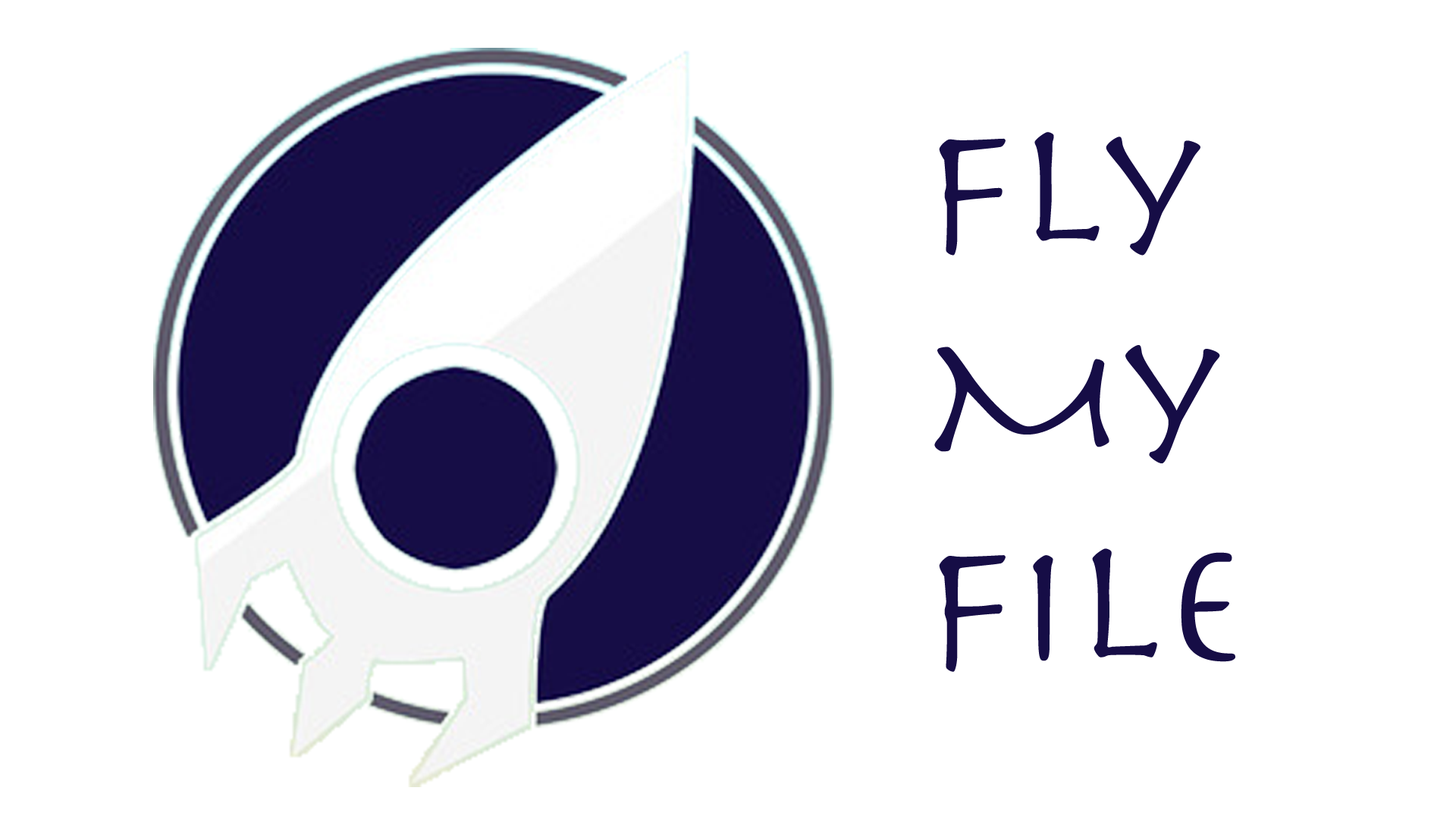
<style>
.page{position:relative;width:1456px;height:819px;background:#ffffff}
.page>*{position:absolute;margin:0}
.t1{font:173.5px "Herculanum";color:#160d46}
</style>
<div class="page">
<p class="t1" style="left:934px;top:132px;width:301px;height:540px">Fly<br>My <br>File</p>
</div>
